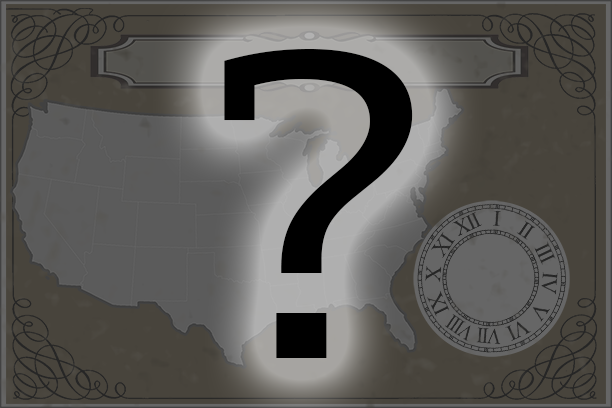
<style>
.page{position:relative;width:612px;height:408px;background:#48443c}
.page>*{position:absolute;margin:0}
.t1{font:416.7px "LucidaConsole";color:#000000}
</style>
<div class="page">
<p class="t1" style="left:224px;top:49px;width:189px;height:309px">?</p>
</div>
